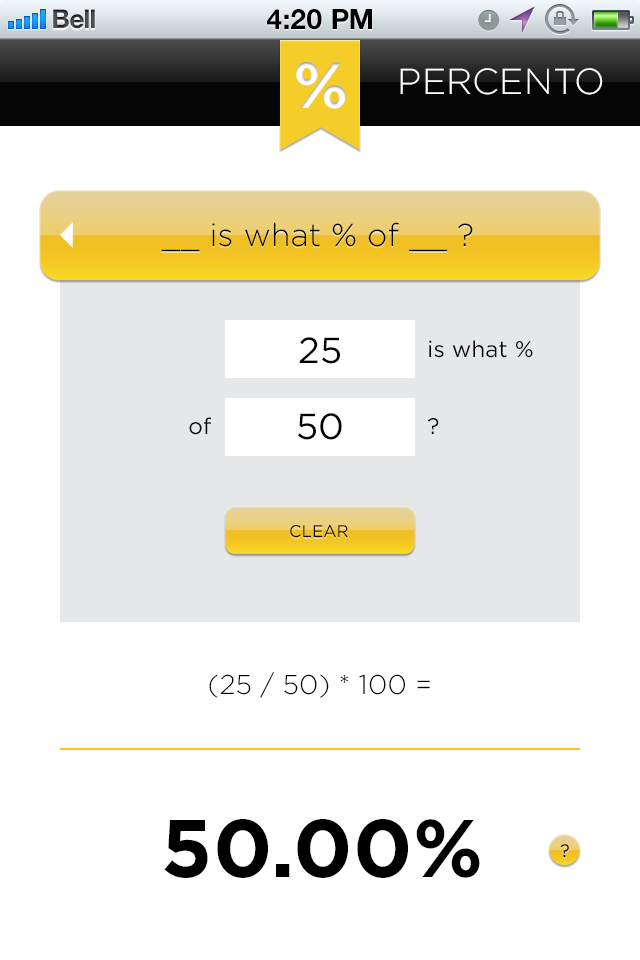
<style>
.page{position:relative;width:640px;height:960px;background:#ffffff}
.page>*{position:absolute;margin:0}
.t1{font:26px "HelveticaNeue-Bold";color:#414141}
.t2{font:28px "HelveticaNeue-Bold";color:#000000;text-transform:uppercase}
.t3{font:65.1px "Gotham-Bold";color:#ffffff}
.t4{font:36.2px "Gotham-Light";letter-spacing:0.005em;color:#ffffff}
.t5{font:31.7px "Gotham-Light";letter-spacing:0.005em;color:#000000}
.t6{font:36.2px "Gotham-Book";letter-spacing:0.005em;color:#000000}
.t7{font:22.6px "Gotham-Book";letter-spacing:0.005em;color:#000000}
.t8{font:16.9px "Gotham-Book";letter-spacing:0.005em;color:#000000}
.t9{font:27.2px "Gotham-Light";letter-spacing:0.005em;color:#000000}
.t10{font:81.5px "Gotham-Bold";letter-spacing:0.005em;color:#000000}
.t11{font:18.1px "Gotham-Book";letter-spacing:0.005em;color:#000000}
</style>
<div class="page">
<p class="t1" style="left:53px;top:9px;width:42px;height:20px">Bell</p>
<p class="t2" style="left:267px;top:9px;width:105px;height:21px">4:20 PM</p>
<p class="t3" style="left:296px;top:62px;width:50px;height:47px">%</p>
<p class="t4" style="left:400px;top:68px;width:203px;height:27px">PERCENTO</p>
<p class="t5" style="left:161px;top:222px;width:312px;height:29px">__ is what % of __ ?</p>
<p class="t5" style="left:161px;top:222px;width:312px;height:29px">__ is what % of __ ?</p>
<p class="t6" style="left:299px;top:337px;width:41px;height:27px">25</p>
<p class="t7" style="left:429px;top:340px;width:104px;height:18px">is what %</p>
<p class="t7" style="left:429px;top:340px;width:104px;height:18px">is what %</p>
<p class="t6" style="left:298px;top:413px;width:44px;height:27px">50</p>
<p class="t7" style="left:189px;top:417px;width:22px;height:18px">of</p>
<p class="t7" style="left:189px;top:417px;width:22px;height:18px">of</p>
<p class="t7" style="left:428px;top:418px;width:11px;height:16px">?</p>
<p class="t7" style="left:428px;top:418px;width:11px;height:16px">?</p>
<p class="t8" style="left:290px;top:525px;width:58px;height:13px">CLEAR</p>
<p class="t9" style="left:209px;top:672px;width:221px;height:26px">(25 / 50) * 100 =</p>
<p class="t10" style="left:164px;top:819px;width:316px;height:59px">50.00%</p>
<p class="t11" style="left:560px;top:844px;width:9px;height:13px">?</p>
</div>
